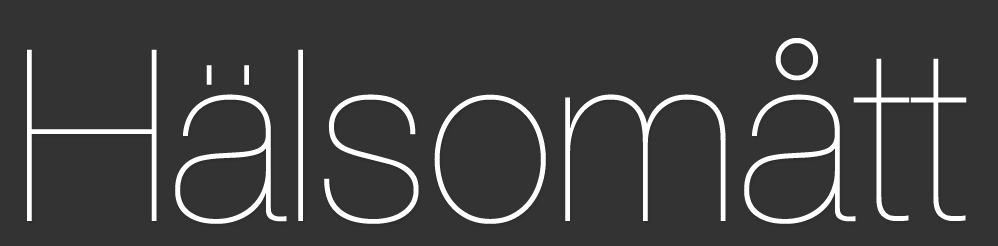
<style>
.page{position:relative;width:998px;height:246px;background:#333333}
.page>*{position:absolute;margin:0}
.t1{font:240px "HelveticaNeue-UltraLight";color:#ffffff}
</style>
<div class="page">
<p class="t1" style="left:27px;top:38px;width:940px;height:186px">Hälsomått</p>
</div>
